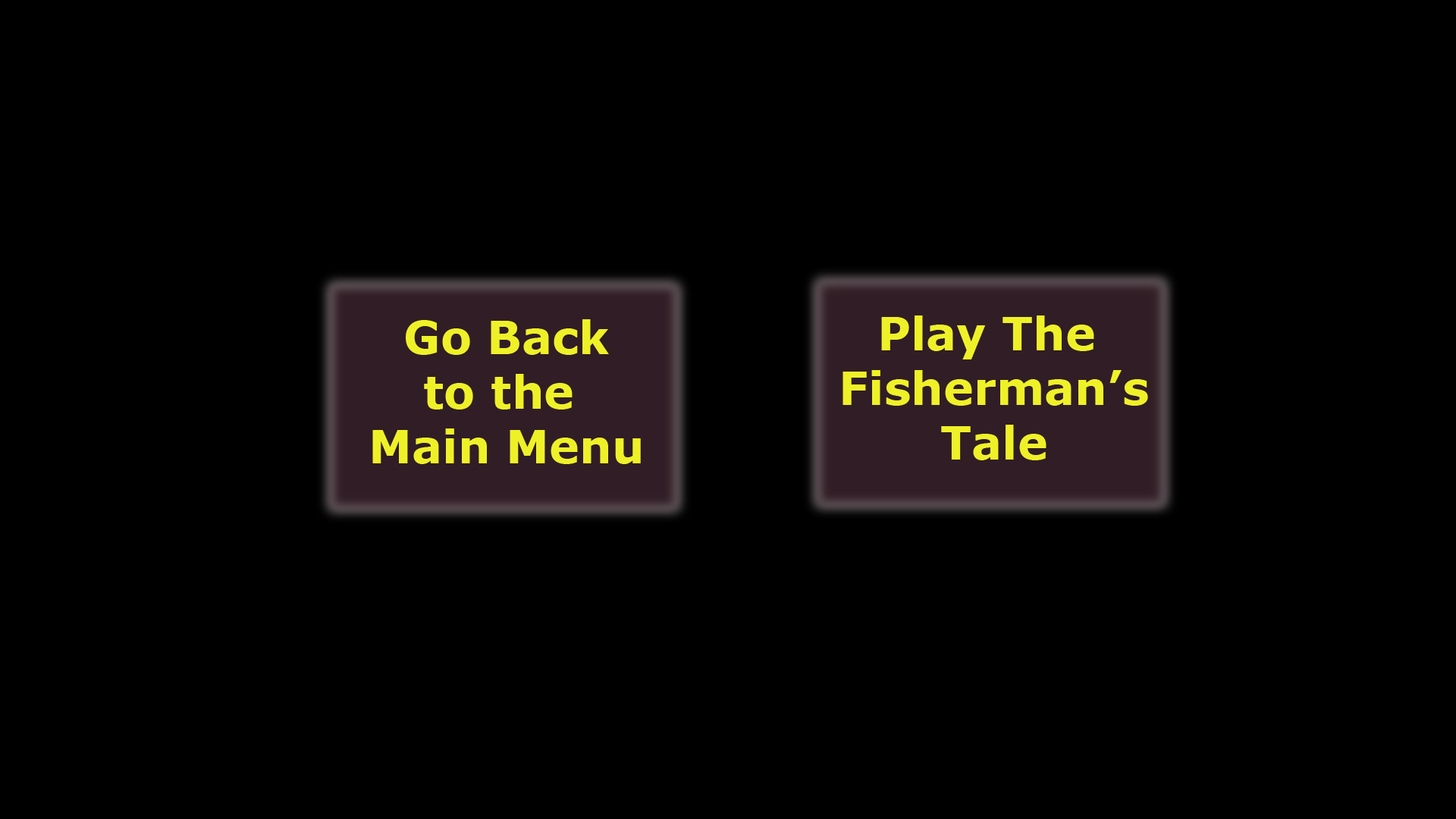
<style>
.page{position:relative;width:1456px;height:819px;background:#000000}
.page>*{position:absolute;margin:0}
.t1{font:45.5px "Verdana-Bold";color:#eff128}
</style>
<div class="page">
<p class="t1" style="left:842px;top:315px;width:306px;height:145px;text-align:center">Play The <br>Fisherman’s<br>Tale</p>
<p class="t1" style="left:372px;top:319px;width:269px;height:145px;text-align:center">Go Back<br>to the <br>Main Menu</p>
</div>
